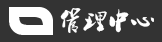
<style>
.page{position:relative;width:162px;height:42px;background:#333333}
.page>*{position:absolute;margin:0}
.t1{font:24px "Ò¶¸ùÓÑÐÐÊé·±";color:#ffffff}
</style>
<div class="page">
<p class="t1" style="left:60px;top:8px;width:94px;height:25px">管理中心</p>
</div>
